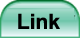
<style>
.page{position:relative;width:80px;height:38px}
.page>*{position:absolute;margin:0}
.t1{font:36px "Arial-BoldMT";color:#000000}
</style>
<div class="page">
<p class="t1" style="left:18px;top:13px;width:42px;height:16px">Link</p>
</div>
